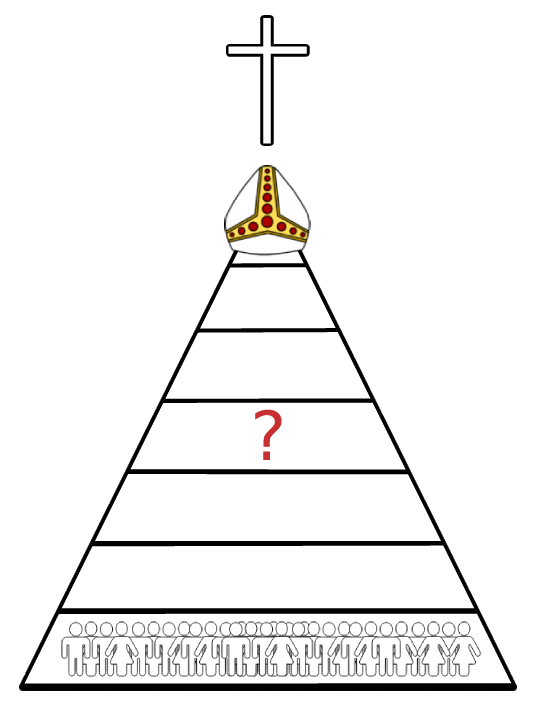
<style>
.page{position:relative;width:536px;height:705px;background:#ffffff}
.page>*{position:absolute;margin:0}
.t1{font:67.9px "DejaVuSans";color:#c63030}
</style>
<div class="page">
<p class="t1" style="left:255px;top:409px;width:27px;height:51px">?</p>
</div>
